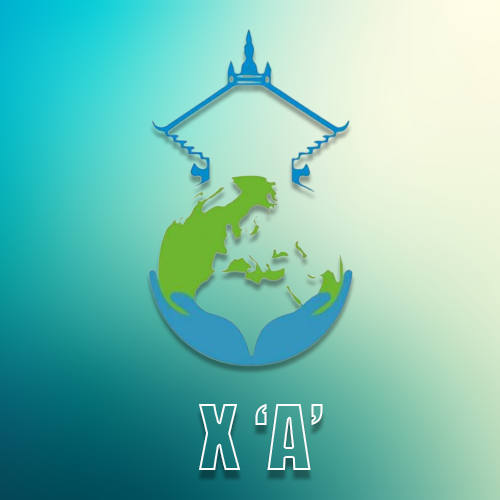
<style>
.page{position:relative;width:500px;height:500px}
.page>*{position:absolute;margin:0}
.t1{font:82.5px "Impact"}
</style>
<div class="page">
<p class="t1" style="left:199px;top:404px;width:124px;height:66px">X ‘A’</p>
</div>
